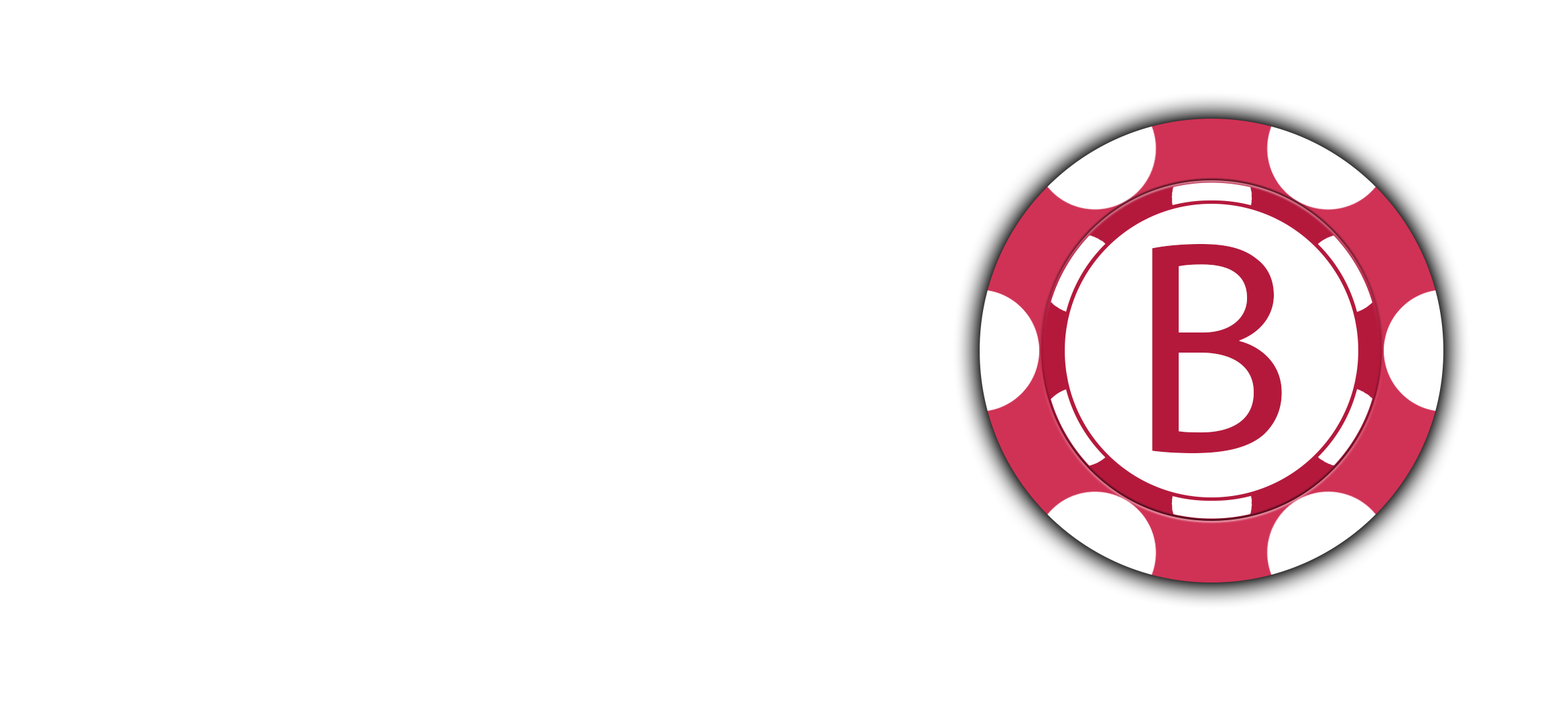
<style>
.page{position:relative;width:1568px;height:724px;background:#ffffff}
.page>*{position:absolute;margin:0}
.t1{font:304.8px "MyriadPro-Regular";letter-spacing:0.05em;color:#b4193c}
</style>
<div class="page">
<p class="t1" style="left:1152px;top:244px;width:130px;height:209px">B</p>
</div>
